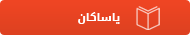
<style>
.page{position:relative;width:190px;height:35px}
.page>*{position:absolute;margin:0}
.t1{font:11px "DroidArabicKufi-Bold";color:#ffffff}
</style>
<div class="page">
<p class="t1" style="left:78px;top:12px;width:42px;height:12px">یاساکان</p>
</div>
